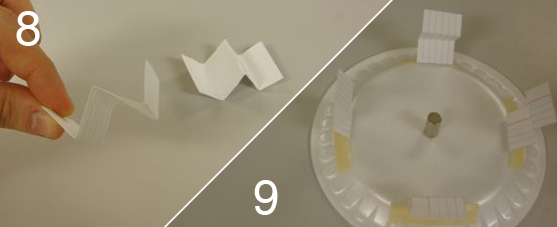
<style>
.page{position:relative;width:557px;height:227px}
.page>*{position:absolute;margin:0}
.t1{font:48px "Helvetica";color:#ffffff}
</style>
<div class="page">
<p class="t1" style="left:16px;top:11px;width:24px;height:35px">8</p>
<p class="t1" style="left:254px;top:180px;width:24px;height:35px">9</p>
</div>
